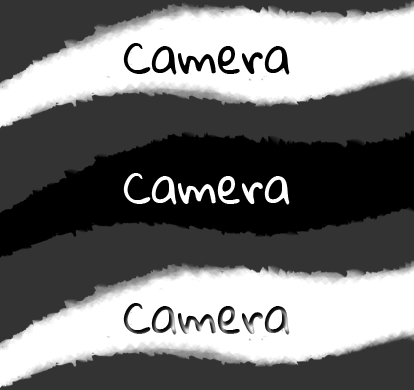
<style>
.page{position:relative;width:414px;height:390px;background:#333333}
.page>*{position:absolute;margin:0}
.t1{font:45px "GloriaHallelujah";color:#000000}
.t2{font:45px "GloriaHallelujah";color:#ffffff}
.t3{font:45px "GloriaHallelujah"}
</style>
<div class="page">
<p class="t1" style="left:123px;top:43px;width:167px;height:32px">Camera</p>
<p class="t2" style="left:123px;top:173px;width:167px;height:32px">Camera</p>
<p class="t3" style="left:123px;top:303px;width:167px;height:32px">Camera</p>
</div>
